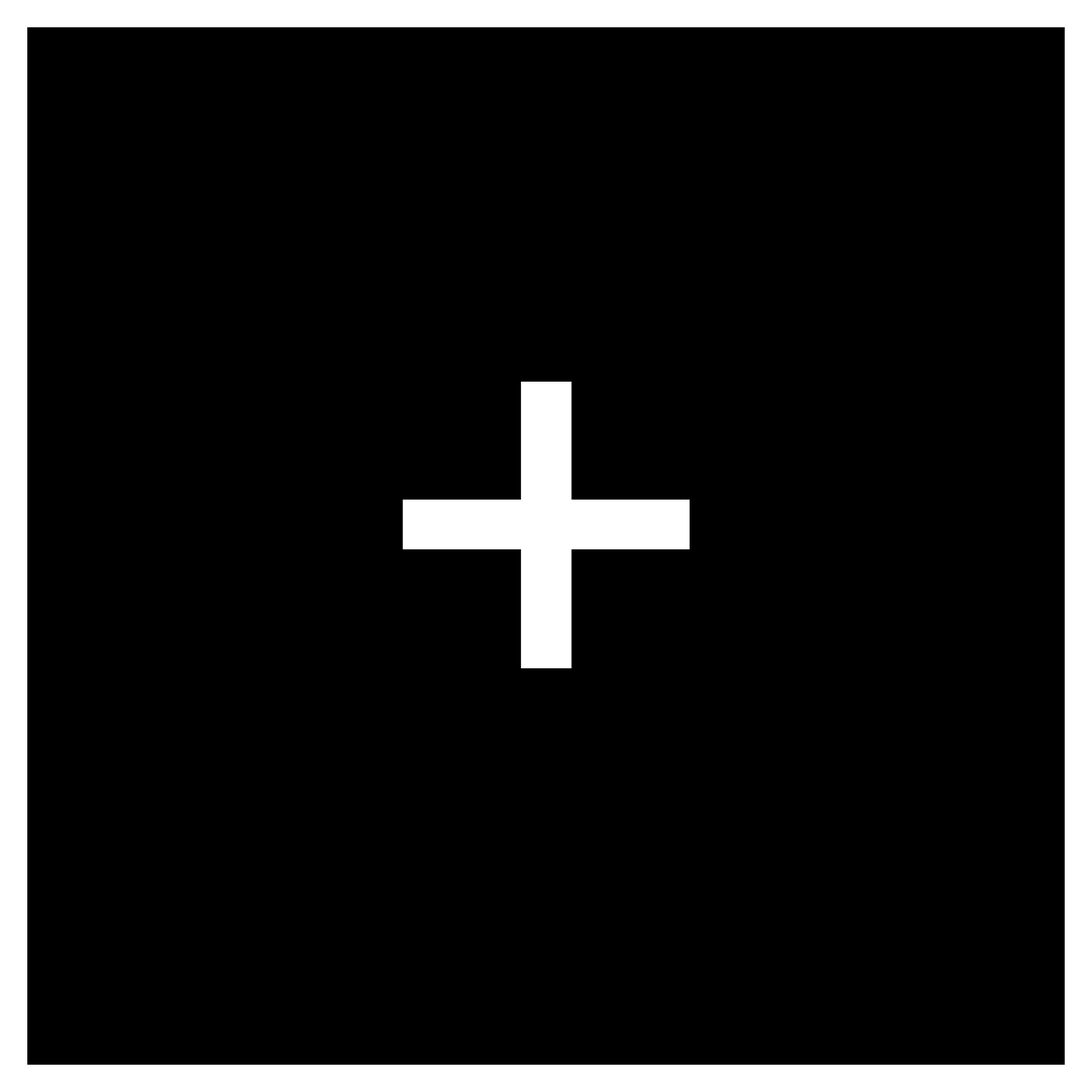
<style>
.page{position:relative;width:1092px;height:1092px;background:#000000}
.page>*{position:absolute;margin:0}
.t1{font:606.7px "ArialMT";color:#ffffff}
</style>
<div class="page">
<p class="t1" style="left:402px;top:382px;width:288px;height:286px">+</p>
</div>
